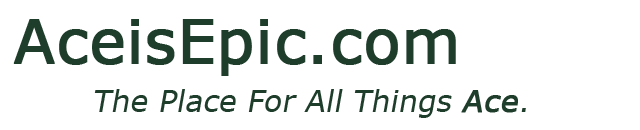
<style>
.page{position:relative;width:640px;height:130px;background:#ffffff}
.page>*{position:absolute;margin:0}
.t1{font:60px "Verdana";color:#1f3d2b;font-weight:bold}
.t2{font:30px "Verdana";color:#1f3d2b;font-style:italic}
.t3{font:30px "Verdana";color:#1f3d2b;font-weight:bold;font-style:italic}
</style>
<div class="page">
<p class="t1" style="left:13px;top:19px;width:443px;height:57px">AceisEpic.com</p>
<p class="t2" style="left:94px;top:89px;width:432px;height:29px">The Place For All Things <span class="t3">Ace</span>.</p>
</div>
